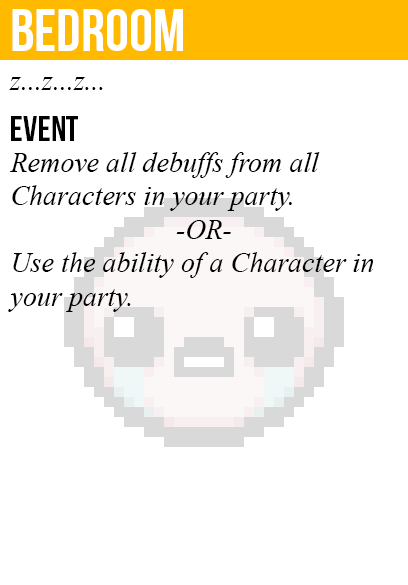
<style>
.page{position:relative;width:408px;height:585px;background:#ffffff}
.page>*{position:absolute;margin:0}
.t1{font:60px "BebasNeue";color:#ffffff}
.t2{font:28px "TimesNewRomanPS-ItalicMT";color:#000000}
.t3{font:36px "BebasNeue";color:#000000}
</style>
<div class="page">
<p class="t1" style="left:12px;top:9px;width:171px;height:42px">bedroom</p>
<p class="t2" style="left:9px;top:77px;width:94px;height:13px">z...z...z...</p>
<p class="t3" style="left:11px;top:116px;width:67px;height:25px">event</p>
<p class="t2" style="left:8px;top:152px;width:366px;height:160px">Remove all debuffs from all<br>Characters in your party.<br><br>Use the ability of a Character in<br>your party.</p>
<p class="t2" style="left:176px;top:220px;width:55px;height:19px">-OR-</p>
</div>
